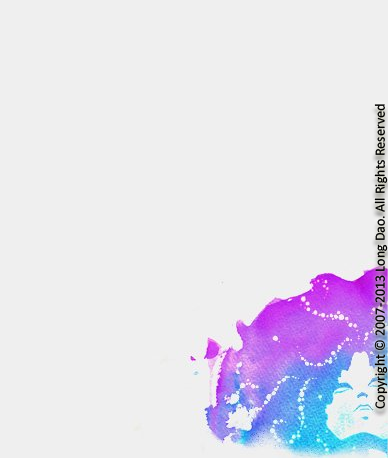
<style>
.page{position:relative;width:388px;height:458px;background:#efefef}
.page>*{position:absolute;margin:0}
.t1{font:14px "Calibri";color:#000000}
</style>
<div class="page">
<p class="t1" style="left:374px;top:104px;width:14px;height:305px;rotate:-90deg">Copyright © 2007-2013 Long Dao. All Rights Reserved</p>
</div>
